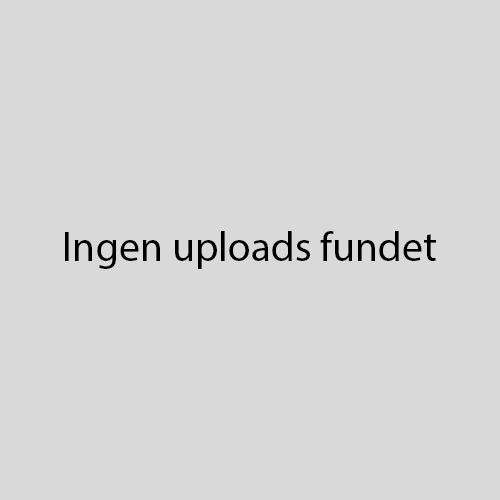
<style>
.page{position:relative;width:500px;height:500px;background:#d9d9d9}
.page>*{position:absolute;margin:0}
.t1{font:41.7px "MyriadPro-Regular";color:#000000}
</style>
<div class="page">
<p class="t1" style="left:65px;top:231px;width:371px;height:38px">Ingen uploads fundet</p>
</div>
